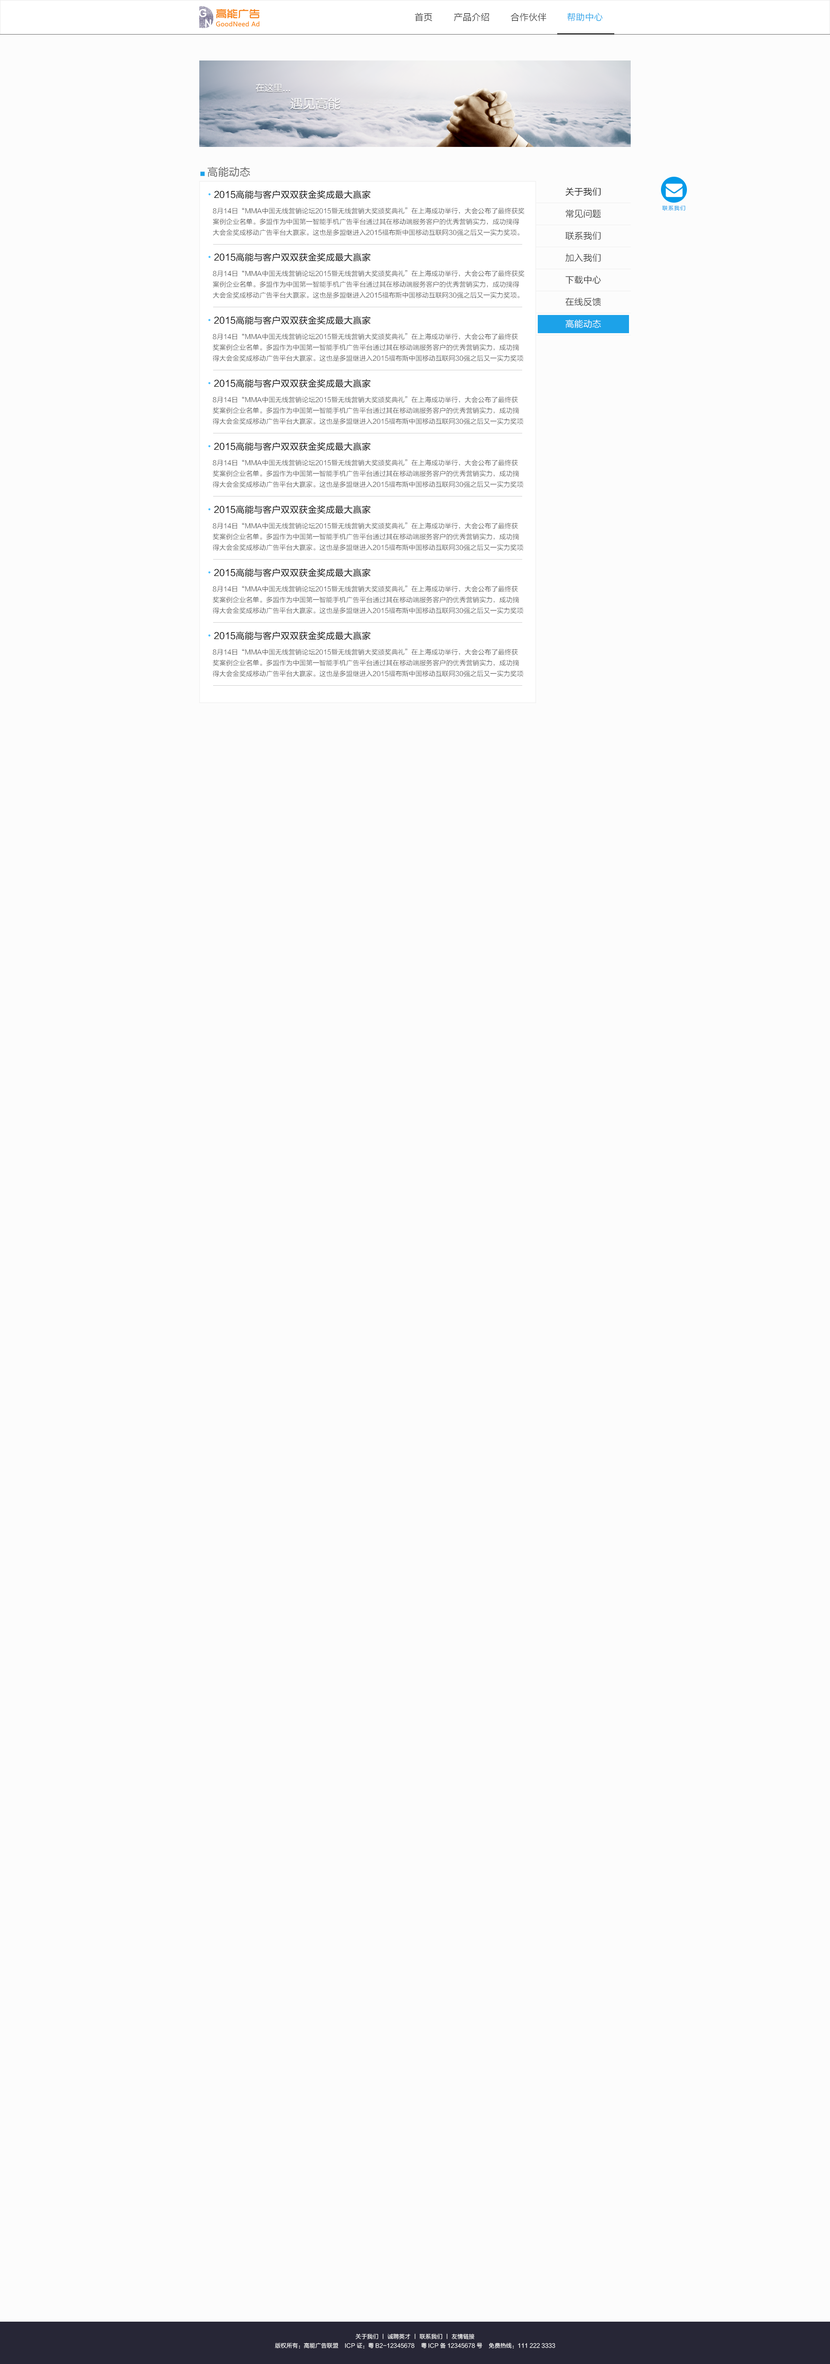
<style>
.page{position:relative;width:830px;height:2364px;background:#fcfcfc}
.page>*{position:absolute;margin:0}
.t1{font:9px "FZLTXHK";color:#333333}
.t2{font:9px "FZLTXHK";color:#1ca2e9}
.t3{font:9px "FZLTHK--GBK1-0";color:#fcfcfc}
.t4{font:12.6px "FZLTHK--GBK1-0";color:#fcfcfc}
.t5{font:10.8px "FZLTHK--GBK1-0";color:#666666}
.t6{font:5.4px "FZLTHK--GBK1-0";color:#1ca2e9}
.t7{font:9px "FZLTHK--GBK1-0";color:#000000}
.t8{font:9px "AdobeHeitiStd-Regular";color:#47c0ff}
.t9{font:9px "FZLTXHK";color:#000000}
.t10{font:6.7px/10.8px "FZLTXHK";color:#333333}
.t11{font:5.4px "FZLTXHK";letter-spacing:0.1em;color:#039ae9}
.t12{font:9px "FZLTXHK";color:#ffffff}
.t13{font:5.8px "FZLTXHK";color:#ffffff}
</style>
<div class="page">
<p class="t1" style="left:414px;top:13px;width:18px;height:9px">首页</p>
<p class="t1" style="left:454px;top:13px;width:35px;height:9px">产品介绍</p>
<p class="t1" style="left:510px;top:13px;width:36px;height:9px">合作伙伴</p>
<p class="t2" style="left:567px;top:13px;width:35px;height:9px">帮助中心</p>
<p class="t3" style="left:255px;top:83px;width:35px;height:9px">在这里...</p>
<p class="t4" style="left:290px;top:97px;width:50px;height:12px">遇见高能</p>
<p class="t5" style="left:200px;top:167px;width:50px;height:10px"><span class="t6">■ </span>高能动态</p>
<p class="t7" style="left:208px;top:190px;width:162px;height:9px"><span class="t8">•</span>2015高能与客户双双获金奖成最大赢家</p>
<p class="t9" style="left:565px;top:188px;width:36px;height:8px">关于我们</p>
<p class="t10" style="left:213px;top:207px;width:311px;height:28px">8月14日“MMA中国无线营销论坛2015暨无线营销大奖颁奖典礼”在上海成功举行，大会公布了最终获奖案例企业名单。多盟作为中国第一智能手机广告平台通过其在移动端服务客户的优秀营销实力，成功摘得大会金奖成移动广告平台大赢家。这也是多盟继进入2015福布斯中国移动互联网30强之后又一实力奖项。</p>
<p class="t1" style="left:565px;top:209px;width:36px;height:9px">常见问题</p>
<p class="t11" style="left:662px;top:205px;width:23px;height:6px">联系我们</p>
<p class="t1" style="left:565px;top:232px;width:36px;height:8px">联系我们</p>
<p class="t7" style="left:208px;top:253px;width:162px;height:8px"><span class="t8">•</span>2015高能与客户双双获金奖成最大赢家</p>
<p class="t1" style="left:565px;top:253px;width:36px;height:9px">加入我们</p>
<p class="t10" style="left:213px;top:270px;width:311px;height:28px">8月14日“MMA中国无线营销论坛2015暨无线营销大奖颁奖典礼”在上海成功举行，大会公布了最终获奖案例企业名单。多盟作为中国第一智能手机广告平台通过其在移动端服务客户的优秀营销实力，成功摘得大会金奖成移动广告平台大赢家。这也是多盟继进入2015福布斯中国移动互联网30强之后又一实力奖项。</p>
<p class="t1" style="left:565px;top:275px;width:36px;height:9px">下载中心</p>
<p class="t1" style="left:565px;top:298px;width:36px;height:8px">在线反馈</p>
<p class="t7" style="left:208px;top:316px;width:162px;height:8px"><span class="t8">•</span>2015高能与客户双双获金奖成最大赢家</p>
<p class="t12" style="left:565px;top:319px;width:36px;height:9px">高能动态</p>
<p class="t10" style="left:213px;top:333px;width:310px;height:28px">8月14日“MMA中国无线营销论坛2015暨无线营销大奖颁奖典礼”在上海成功举行，大会公布了最终获奖案例企业名单。多盟作为中国第一智能手机广告平台通过其在移动端服务客户的优秀营销实力，成功摘得大会金奖成移动广告平台大赢家。这也是多盟继进入2015福布斯中国移动互联网30强之后又一实力奖项</p>
<p class="t7" style="left:208px;top:379px;width:162px;height:9px"><span class="t8">•</span>2015高能与客户双双获金奖成最大赢家</p>
<p class="t10" style="left:213px;top:396px;width:310px;height:28px">8月14日“MMA中国无线营销论坛2015暨无线营销大奖颁奖典礼”在上海成功举行，大会公布了最终获奖案例企业名单。多盟作为中国第一智能手机广告平台通过其在移动端服务客户的优秀营销实力，成功摘得大会金奖成移动广告平台大赢家。这也是多盟继进入2015福布斯中国移动互联网30强之后又一实力奖项</p>
<p class="t7" style="left:208px;top:442px;width:162px;height:9px"><span class="t8">•</span>2015高能与客户双双获金奖成最大赢家</p>
<p class="t10" style="left:213px;top:459px;width:310px;height:28px">8月14日“MMA中国无线营销论坛2015暨无线营销大奖颁奖典礼”在上海成功举行，大会公布了最终获奖案例企业名单。多盟作为中国第一智能手机广告平台通过其在移动端服务客户的优秀营销实力，成功摘得大会金奖成移动广告平台大赢家。这也是多盟继进入2015福布斯中国移动互联网30强之后又一实力奖项</p>
<p class="t7" style="left:208px;top:505px;width:162px;height:9px"><span class="t8">•</span>2015高能与客户双双获金奖成最大赢家</p>
<p class="t10" style="left:213px;top:522px;width:310px;height:28px">8月14日“MMA中国无线营销论坛2015暨无线营销大奖颁奖典礼”在上海成功举行，大会公布了最终获奖案例企业名单。多盟作为中国第一智能手机广告平台通过其在移动端服务客户的优秀营销实力，成功摘得大会金奖成移动广告平台大赢家。这也是多盟继进入2015福布斯中国移动互联网30强之后又一实力奖项</p>
<p class="t7" style="left:208px;top:568px;width:162px;height:9px"><span class="t8">•</span>2015高能与客户双双获金奖成最大赢家</p>
<p class="t10" style="left:213px;top:585px;width:310px;height:29px">8月14日“MMA中国无线营销论坛2015暨无线营销大奖颁奖典礼”在上海成功举行，大会公布了最终获奖案例企业名单。多盟作为中国第一智能手机广告平台通过其在移动端服务客户的优秀营销实力，成功摘得大会金奖成移动广告平台大赢家。这也是多盟继进入2015福布斯中国移动互联网30强之后又一实力奖项</p>
<p class="t7" style="left:208px;top:631px;width:162px;height:9px"><span class="t8">•</span>2015高能与客户双双获金奖成最大赢家</p>
<p class="t10" style="left:213px;top:649px;width:310px;height:28px">8月14日“MMA中国无线营销论坛2015暨无线营销大奖颁奖典礼”在上海成功举行，大会公布了最终获奖案例企业名单。多盟作为中国第一智能手机广告平台通过其在移动端服务客户的优秀营销实力，成功摘得大会金奖成移动广告平台大赢家。这也是多盟继进入2015福布斯中国移动互联网30强之后又一实力奖项</p>
<p class="t13" style="left:355px;top:2333px;width:119px;height:6px">关于我们 丨 诚聘英才 丨 联系我们 丨 友情链接</p>
<p class="t13" style="left:275px;top:2342px;width:280px;height:6px">版权所有：高能广告联盟    ICP证：粤B2-12345678    粤ICP备12345678号    免费热线：111 222 3333</p>
</div>
